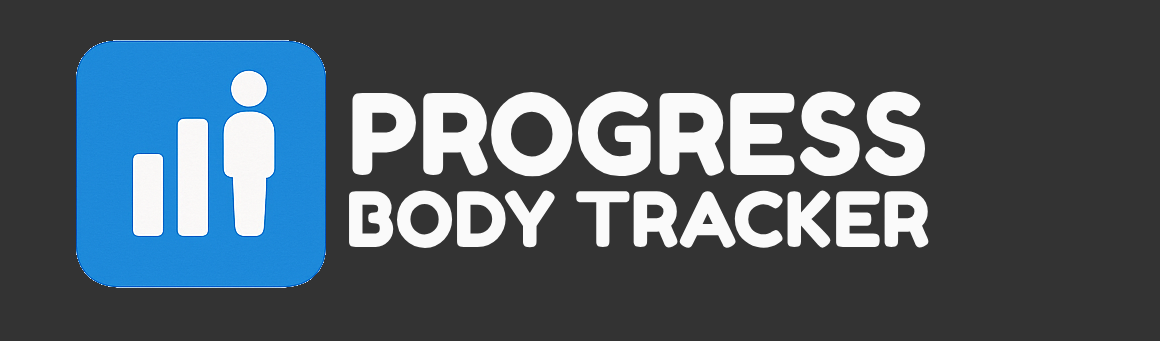
<style>
.page{position:relative;width:1160px;height:341px;background:#333333}
.page>*{position:absolute;margin:0}
.t1{font:112px "FredokaOne-Regular";color:#fafafa}
.t2{font:76px "FredokaOne-Regular";color:#fafafa}
</style>
<div class="page">
<p class="t1" style="left:352px;top:91px;width:574px;height:86px">PROGRESS</p>
<p class="t2" style="left:349px;top:190px;width:580px;height:58px">BODY TRACKER</p>
</div>
